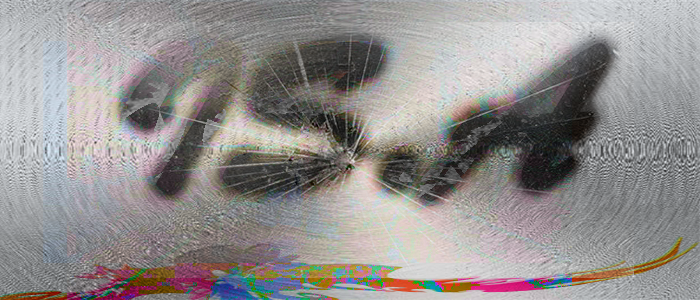
<style>
.page{position:relative;width:700px;height:300px}
.page>*{position:absolute;margin:0}
.t1{font:210px "BrushScriptStd";letter-spacing:0.004em}
</style>
<div class="page">
<p class="t1" style="left:126px;top:41px;width:482px;height:158px">IS.A</p>
</div>
